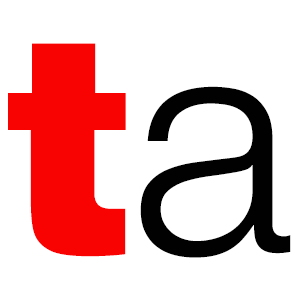
<style>
.page{position:relative;width:297px;height:297px;background:#ffffff}
.page>*{position:absolute;margin:0}
.t1{font:312.5px "Helvetica-Black";letter-spacing:-0.06em;color:#f90202}
.t2{font:312.5px "HelveticaNeue-Light";letter-spacing:-0.05em;color:#010101}
</style>
<div class="page">
<p class="t1" style="left:8px;top:43px;width:118px;height:214px">t</p>
<p class="t2" style="left:140px;top:86px;width:151px;height:172px">a</p>
</div>
